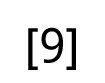
<style>
.page{position:relative;width:105px;height:83px;background:#ffffff}
.page>*{position:absolute;margin:0}
.t1{font:47.9px "DroidSans";color:#000000}
</style>
<div class="page">
<p class="t1" style="left:28px;top:27px;width:48px;height:43px">[9]</p>
</div>
